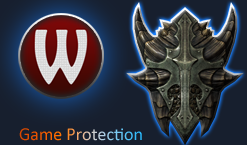
<style>
.page{position:relative;width:247px;height:145px;background:#171f2e}
.page>*{position:absolute;margin:0}
.t1{font:18px "Calibri"}
</style>
<div class="page">
<p class="t1" style="left:19px;top:128px;width:123px;height:13px">Game Protection</p>
</div>
